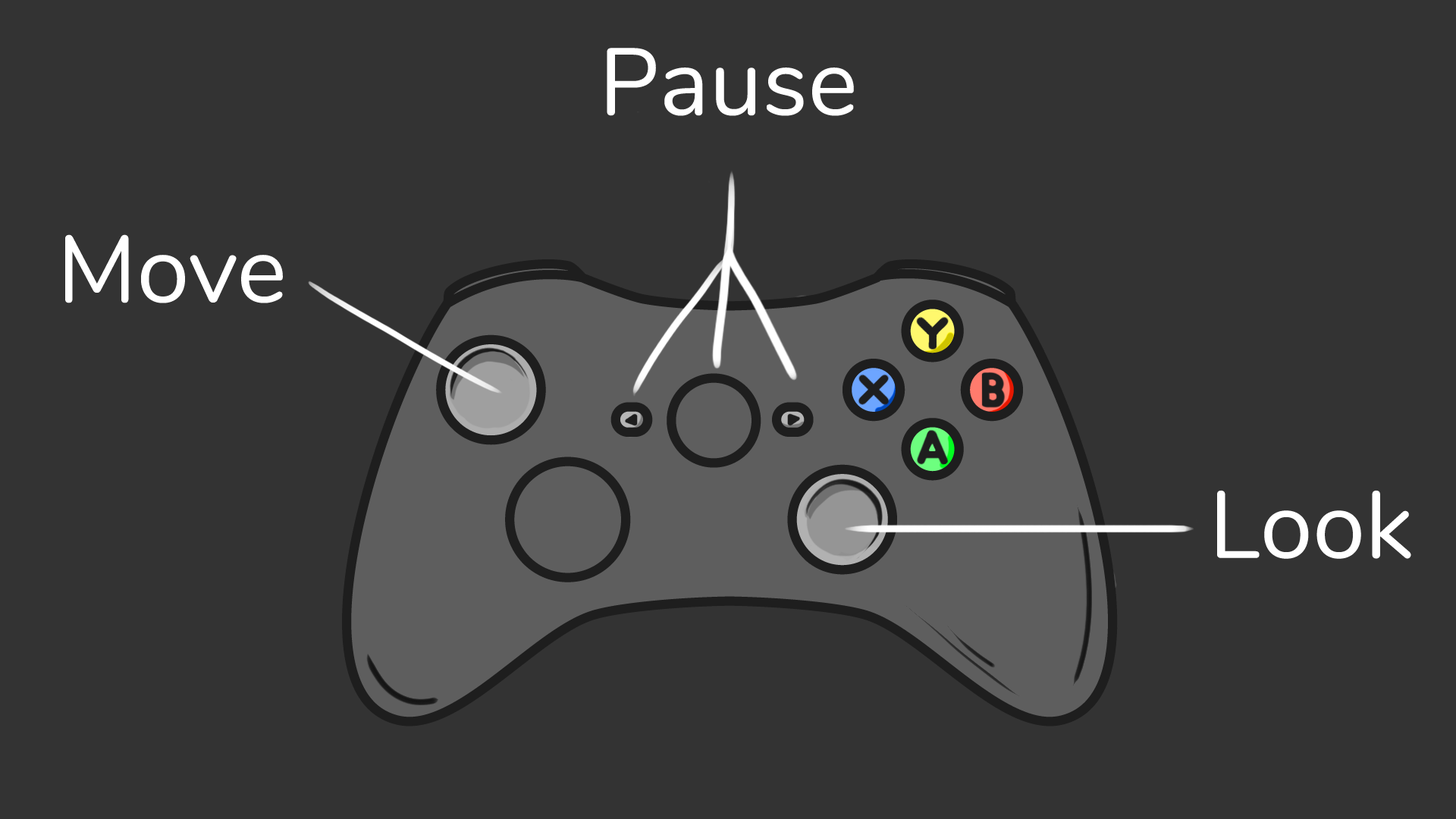
<style>
.page{position:relative;width:1456px;height:819px;background:#333333}
.page>*{position:absolute;margin:0}
.t1{font:94.8px "Nunito-Regular";color:#ffffff}
</style>
<div class="page">
<p class="t1" style="left:607px;top:48px;width:247px;height:68px">Pause</p>
<p class="t1" style="left:65px;top:234px;width:218px;height:69px">Move</p>
<p class="t1" style="left:1217px;top:490px;width:194px;height:69px">Look</p>
</div>
